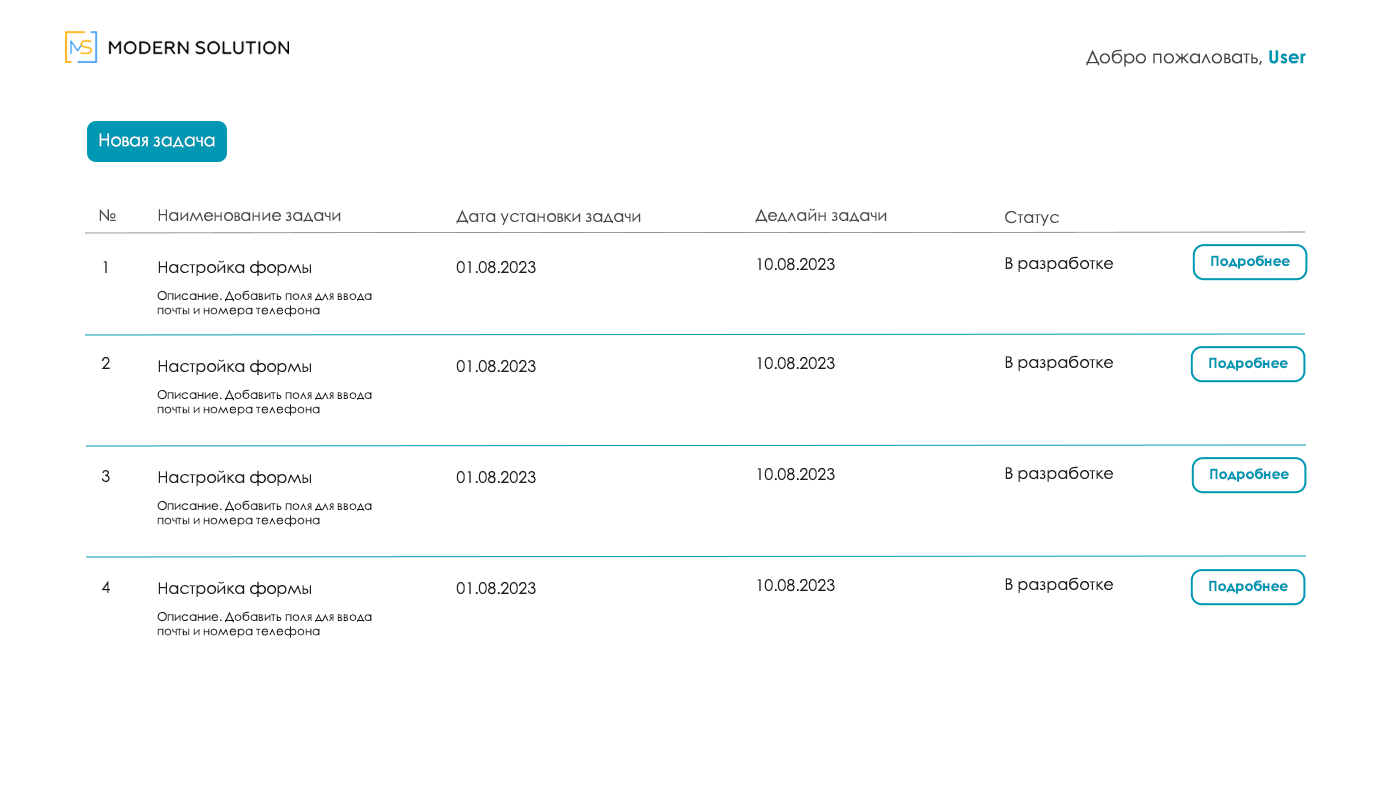
<style>
.page{position:relative;width:1400px;height:800px;background:#ffffff}
.page>*{position:absolute;margin:0}
.t1{font:18px "CenturyGothic";color:#454545}
.t2{font:18px "CenturyGothic-Bold";color:#0097b2}
.t3{font:17.5px "CenturyGothic";color:#ffffff}
.t4{font:16px "CenturyGothic";color:#4c4c4c}
.t5{font:16px "CenturyGothic";color:#1e1e1e}
.t6{font:13.9px "CenturyGothic-Bold";color:#0097b2}
.t7{font:16px "CenturyGothic"}
.t8{font:12px "CenturyGothic";color:#1e1e1e}
</style>
<div class="page">
<p class="t1" style="left:1086px;top:49px;width:220px;height:18px">Добро пожаловать, <span class="t2">User</span></p>
<p class="t3" style="left:99px;top:133px;width:116px;height:15px">Новая задача</p>
<p class="t4" style="left:99px;top:209px;width:17px;height:12px">№</p>
<p class="t4" style="left:158px;top:209px;width:183px;height:13px">Наименование задачи</p>
<p class="t4" style="left:755px;top:208px;width:132px;height:15px">Дедлайн задачи</p>
<p class="t4" style="left:456px;top:210px;width:185px;height:15px">Дата установки задачи</p>
<p class="t4" style="left:1005px;top:210px;width:54px;height:16px">Статус</p>
<p class="t5" style="left:757px;top:257px;width:78px;height:14px">10.08.2023</p>
<p class="t5" style="left:1005px;top:256px;width:108px;height:16px">В разработке</p>
<p class="t6" style="left:1211px;top:255px;width:79px;height:14px">Подробнее</p>
<p class="t7" style="left:103px;top:261px;width:4px;height:12px">1</p>
<p class="t5" style="left:158px;top:260px;width:153px;height:16px">Настройка формы</p>
<p class="t5" style="left:456px;top:260px;width:80px;height:14px">01.08.2023</p>
<p class="t8" style="left:157px;top:290px;width:215px;height:27px">Описание. Добавить поля для ввода почты и номера телефона</p>
<p class="t5" style="left:101px;top:356px;width:9px;height:13px">2</p>
<p class="t5" style="left:158px;top:359px;width:153px;height:16px">Настройка формы</p>
<p class="t5" style="left:456px;top:359px;width:80px;height:14px">01.08.2023</p>
<p class="t5" style="left:757px;top:356px;width:78px;height:14px">10.08.2023</p>
<p class="t5" style="left:1005px;top:355px;width:108px;height:16px">В разработке</p>
<p class="t6" style="left:1209px;top:357px;width:79px;height:14px">Подробнее</p>
<p class="t8" style="left:157px;top:389px;width:215px;height:27px">Описание. Добавить поля для ввода почты и номера телефона</p>
<p class="t5" style="left:101px;top:469px;width:9px;height:14px">3</p>
<p class="t5" style="left:158px;top:470px;width:153px;height:16px">Настройка формы</p>
<p class="t5" style="left:456px;top:470px;width:80px;height:14px">01.08.2023</p>
<p class="t5" style="left:757px;top:467px;width:78px;height:14px">10.08.2023</p>
<p class="t5" style="left:1005px;top:466px;width:108px;height:16px">В разработке</p>
<p class="t6" style="left:1210px;top:468px;width:79px;height:14px">Подробнее</p>
<p class="t8" style="left:157px;top:500px;width:215px;height:27px">Описание. Добавить поля для ввода почты и номера телефона</p>
<p class="t5" style="left:101px;top:580px;width:9px;height:13px">4</p>
<p class="t5" style="left:158px;top:581px;width:153px;height:16px">Настройка формы</p>
<p class="t5" style="left:456px;top:581px;width:80px;height:14px">01.08.2023</p>
<p class="t5" style="left:757px;top:578px;width:78px;height:14px">10.08.2023</p>
<p class="t5" style="left:1005px;top:577px;width:108px;height:16px">В разработке</p>
<p class="t6" style="left:1209px;top:580px;width:79px;height:14px">Подробнее</p>
<p class="t8" style="left:157px;top:611px;width:215px;height:27px">Описание. Добавить поля для ввода почты и номера телефона</p>
</div>
